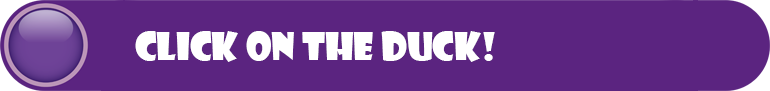
<style>
.page{position:relative;width:770px;height:91px;background:#5b2480}
.page>*{position:absolute;margin:0}
.t1{font:12px "ShowcardGothic-Reg";color:#ffffff}
</style>
<div class="page">
<p class="t1" style="left:135px;top:31px;width:360px;height:31px">Click on the Duck!</p>
</div>
